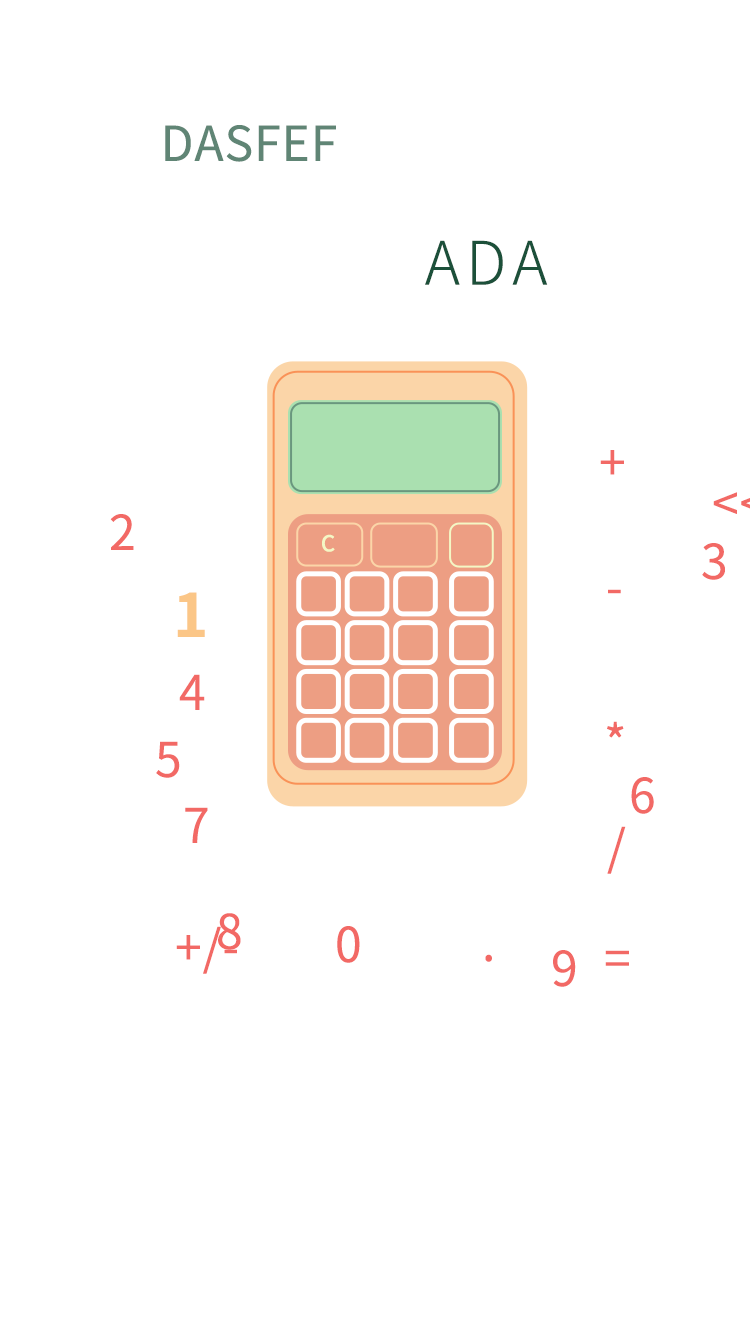
<style>
.page{position:relative;width:750px;height:1334px;background:#ffffff}
.page>*{position:absolute;margin:0}
.t1{font:48px "SourceHanSansCN-Regular";letter-spacing:0.02em;color:#608575;text-transform:uppercase}
.t2{font:60px "SourceHanSansCN-Light";letter-spacing:0.1em;color:#1c503a;text-transform:uppercase}
.t3{font:48px "SourceHanSansCN-Regular";letter-spacing:0.02em;color:#f26965;text-transform:uppercase}
.t4{font:22.1px "SourceHanSansCN-Medium";letter-spacing:0.02em;color:#f4f7c5;text-transform:uppercase}
.t5{font:60px "SourceHanSansCN-Bold";letter-spacing:0.02em;color:#fbc687;text-transform:uppercase}
</style>
<div class="page">
<p class="t1" style="left:165px;top:125px;width:171px;height:37px">dasfef</p>
<p class="t2" style="left:425px;top:240px;width:123px;height:45px">ada</p>
<p class="t3" style="left:600px;top:450px;width:24px;height:25px">+</p>
<p class="t3" style="left:110px;top:514px;width:24px;height:36px">2</p>
<p class="t4" style="left:322px;top:534px;width:13px;height:18px">C</p>
<p class="t3" style="left:702px;top:543px;width:23px;height:37px">3</p>
<p class="t5" style="left:177px;top:592px;width:28px;height:45px">1</p>
<p class="t3" style="left:608px;top:589px;width:13px;height:5px">-</p>
<p class="t3" style="left:179px;top:674px;width:26px;height:36px">4</p>
<p class="t3" style="left:607px;top:721px;width:17px;height:17px">*</p>
<p class="t3" style="left:156px;top:741px;width:24px;height:37px">5</p>
<p class="t3" style="left:631px;top:777px;width:23px;height:37px">6</p>
<p class="t3" style="left:185px;top:807px;width:23px;height:36px">7</p>
<p class="t3" style="left:607px;top:826px;width:19px;height:48px">/</p>
<p class="t3" style="left:218px;top:913px;width:23px;height:37px">8</p>
<p class="t3" style="left:176px;top:926px;width:61px;height:48px">+/-</p>
<p class="t3" style="left:337px;top:926px;width:23px;height:37px">0</p>
<p class="t3" style="left:553px;top:950px;width:23px;height:37px">9</p>
<p class="t3" style="left:605px;top:950px;width:24px;height:16px">=</p>
<p class="t3" style="left:485px;top:954px;width:7px;height:8px">.</p>
</div>
